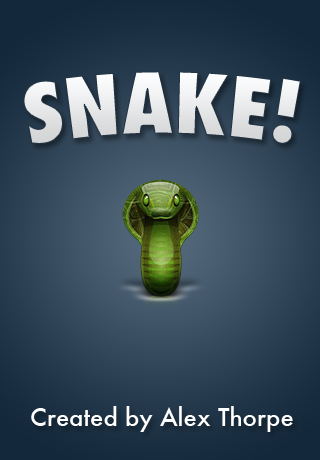
<style>
.page{position:relative;width:320px;height:460px}
.page>*{position:absolute;margin:0}
.t1{font:82px "Futura-CondensedExtraBold";color:#e6e7e8}
.t2{font:24px "Futura-Medium";color:#ffffff}
</style>
<div class="page">
<p class="t1" style="left:23px;top:71px;width:278px;height:73px">SNAKE!</p>
<p class="t2" style="left:31px;top:406px;width:262px;height:26px">Created by Alex Thorpe</p>
</div>
